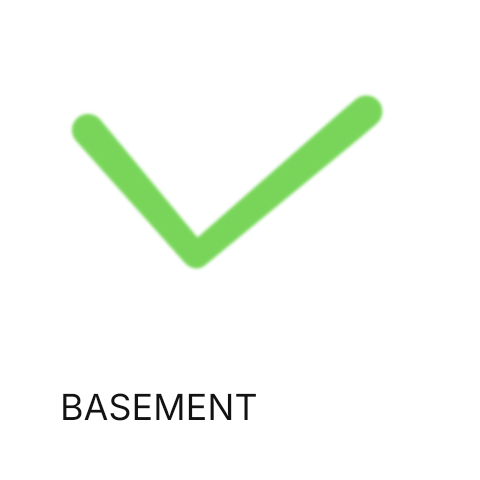
<style>
.page{position:relative;width:480px;height:480px;background:#ffffff}
.page>*{position:absolute;margin:0}
.t1{font:36px "Inter-Regular";color:#121212}
</style>
<div class="page">
<p class="t1" style="left:62px;top:393px;width:195px;height:29px">BASEMENT</p>
</div>
